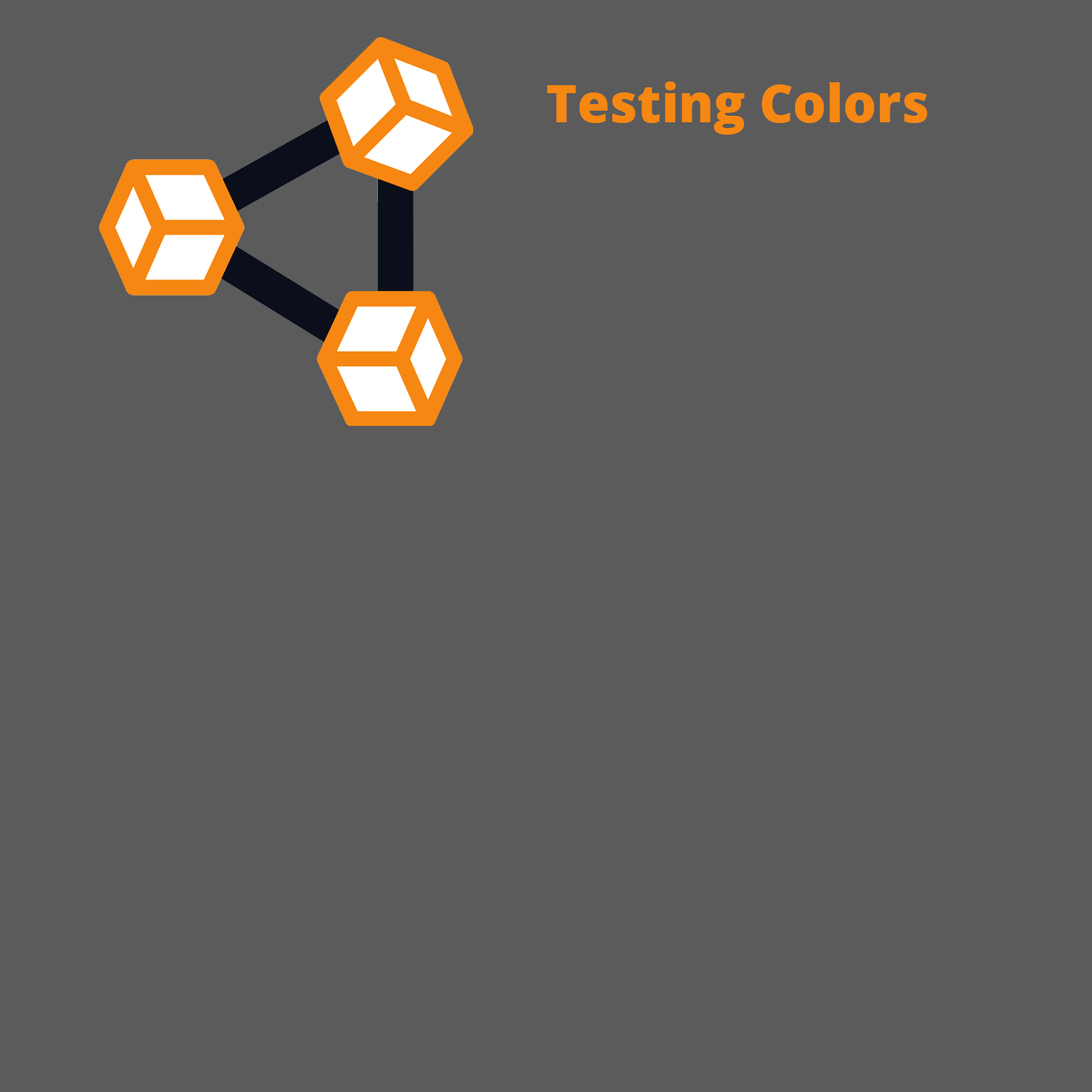
<style>
.page{position:relative;width:1092px;height:1092px;background:#5b5b5b}
.page>*{position:absolute;margin:0}
.t1{font:52.4px "OpenSans-Extrabold";color:#f68712}
</style>
<div class="page">
<p class="t1" style="left:547px;top:82px;width:380px;height:53px">Testing Colors</p>
</div>
